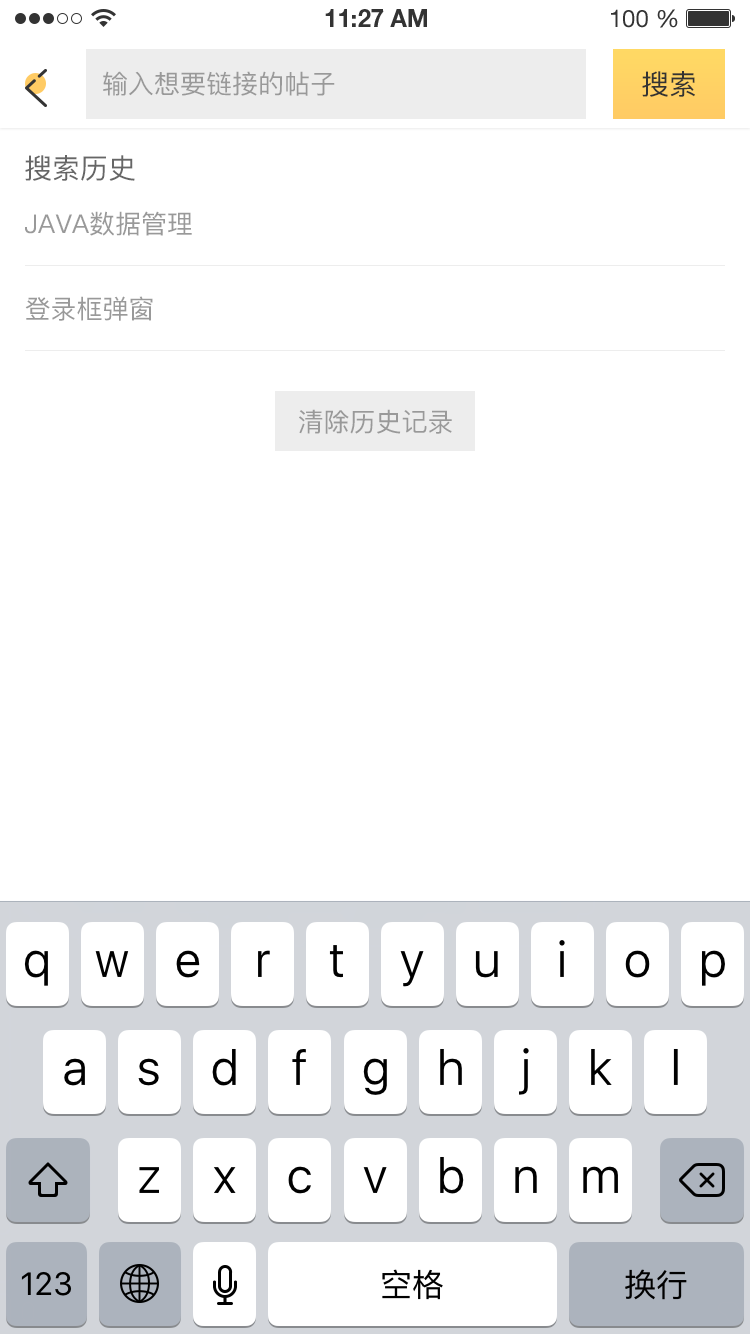
<style>
.page{position:relative;width:750px;height:1334px;background:#ffffff}
.page>*{position:absolute;margin:0}
.t1{font:26px "PingFang-SC-Medium";color:#999999;text-transform:uppercase}
.t2{font:28px "PingFang-SC-Medium";color:#333333;text-transform:uppercase}
.t3{font:28px "PingFang-SC-Medium";color:#666666;text-transform:uppercase}
</style>
<div class="page">
<p class="t1" style="left:103px;top:71px;width:232px;height:25px">输入想要链接的帖子</p>
<p class="t2" style="left:642px;top:71px;width:53px;height:26px">搜索</p>
<p class="t3" style="left:25px;top:155px;width:110px;height:26px">搜索历史</p>
<p class="t1" style="left:25px;top:211px;width:167px;height:25px">java数据管理</p>
<p class="t1" style="left:25px;top:296px;width:128px;height:25px">登录框弹窗</p>
<p class="t1" style="left:299px;top:409px;width:153px;height:25px">清除历史记录</p>
</div>
